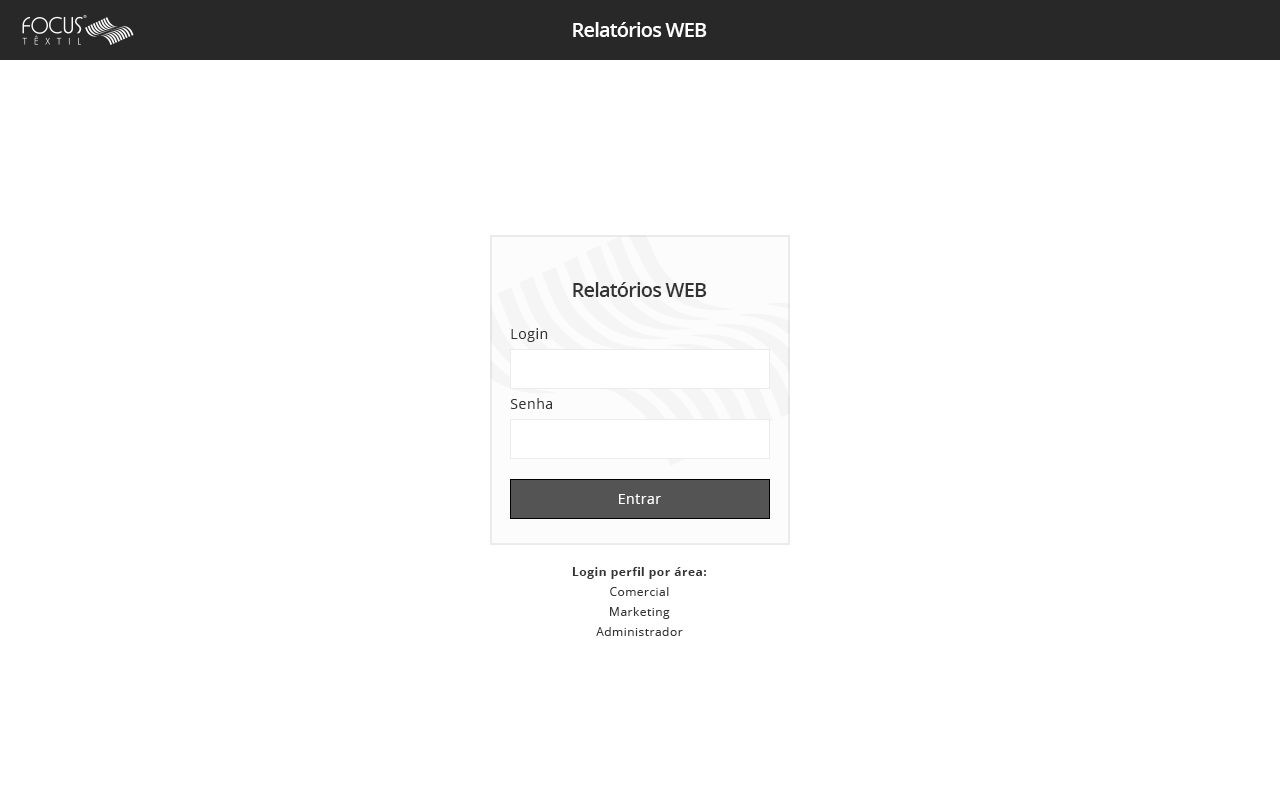
<style>
.page{position:relative;width:1280px;height:800px;background:#ffffff}
.page>*{position:absolute;margin:0}
.t1{font:20px "OpenSans-Semibold";letter-spacing:-0.04em;color:#ffffff}
.t2{font:20px "OpenSans-Semibold";letter-spacing:-0.04em;color:#353434}
.t3{font:14px "OpenSans";letter-spacing:0.04em;color:#353434}
.t4{font:14px "OpenSans";letter-spacing:0.04em;color:#ffffff}
.t5{font:12px/20px "OpenSans";letter-spacing:0.04em;color:#353434}
.t6{font:12px/20px "OpenSans-Bold";letter-spacing:0.04em;color:#353434}
</style>
<div class="page">
<p class="t1" style="left:573px;top:22px;width:134px;height:15px">Relatórios WEB</p>
<p class="t2" style="left:573px;top:282px;width:134px;height:15px">Relatórios WEB</p>
<p class="t3" style="left:511px;top:328px;width:37px;height:14px">Login</p>
<p class="t3" style="left:510px;top:398px;width:42px;height:11px">Senha</p>
<p class="t4" style="left:619px;top:494px;width:42px;height:10px">Entrar</p>
<p class="t5" style="left:572px;top:567px;width:134px;height:69px;text-align:center"><span class="t6">Login perfil por área:<br></span>Comercial<br>Marketing<br>Administrador</p>
</div>
